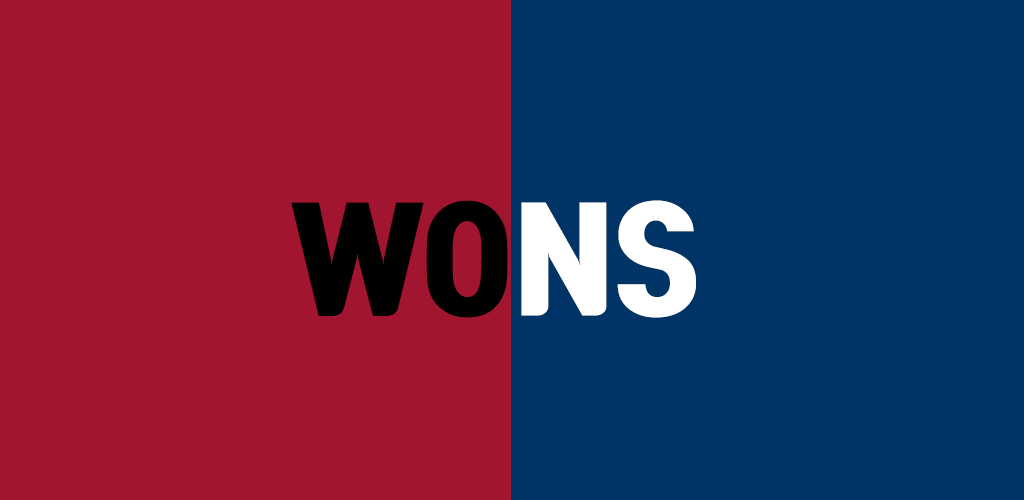
<style>
.page{position:relative;width:1024px;height:500px;background:#003466}
.page>*{position:absolute;margin:0}
.t1{font:130px "TmonMonsoriBlack";color:#000000;text-transform:uppercase}
.t2{font:130px "TmonMonsoriBlack";color:#ffffff;text-transform:uppercase}
</style>
<div class="page">
<p class="t1" style="left:291px;top:200px;width:405px;height:118px">wo<span class="t2">ns</span></p>
</div>
